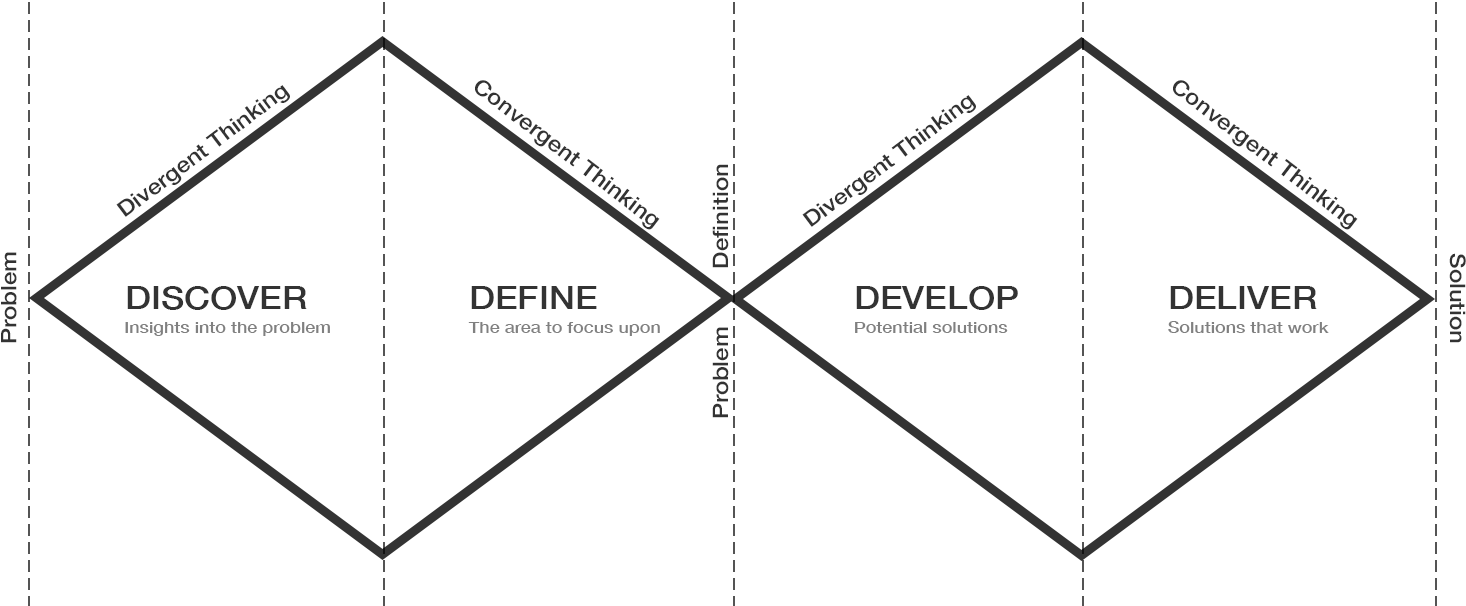
<style>
.page{position:relative;width:1466px;height:606px;background:#ffffff}
.page>*{position:absolute;margin:0}
.t1{font:21.6px "HelveticaNeue-Medium";color:#333333;scale:1.11 1}
.t2{font:16.2px/24px "HelveticaNeue-Medium";color:#808080;scale:1.11 1}
.t3{font:32.4px/24px "HelveticaNeue-Medium";color:#333333;scale:1.11 1}
</style>
<div class="page">
<p class="t1" style="left:116px;top:85px;width:174px;height:132px;rotate:-37deg">Divergent Thinking</p>
<p class="t1" style="left:475px;top:80px;width:185px;height:150px;rotate:37deg">Convergent Thinking</p>
<p class="t1" style="left:1173px;top:80px;width:185px;height:150px;rotate:37deg">Convergent Thinking</p>
<p class="t1" style="left:802px;top:95px;width:174px;height:132px;rotate:-37deg">Divergent Thinking</p>
<p class="t1" style="left:712px;top:164px;width:17px;height:254px;rotate:-90deg">Problem   Definition</p>
<p class="t1" style="left:1px;top:252px;width:16px;height:91px;rotate:-90deg">Problem</p>
<p class="t1" style="left:1449px;top:253px;width:17px;height:90px;rotate:90deg">Solution</p>
<p class="t2" style="left:125px;top:286px;width:205px;height:50px"><span class="t3">DISCOVER<br></span>Insights into the problem</p>
<p class="t2" style="left:468px;top:286px;width:192px;height:50px"><span class="t3">DEFINE<br></span>The area to focus upon</p>
<p class="t2" style="left:855px;top:286px;width:163px;height:47px"><span class="t3">DEVELOP<br></span>Potential solutions</p>
<p class="t2" style="left:1168px;top:286px;width:161px;height:47px"><span class="t3">DELIVER<br></span>Solutions that work</p>
</div>
